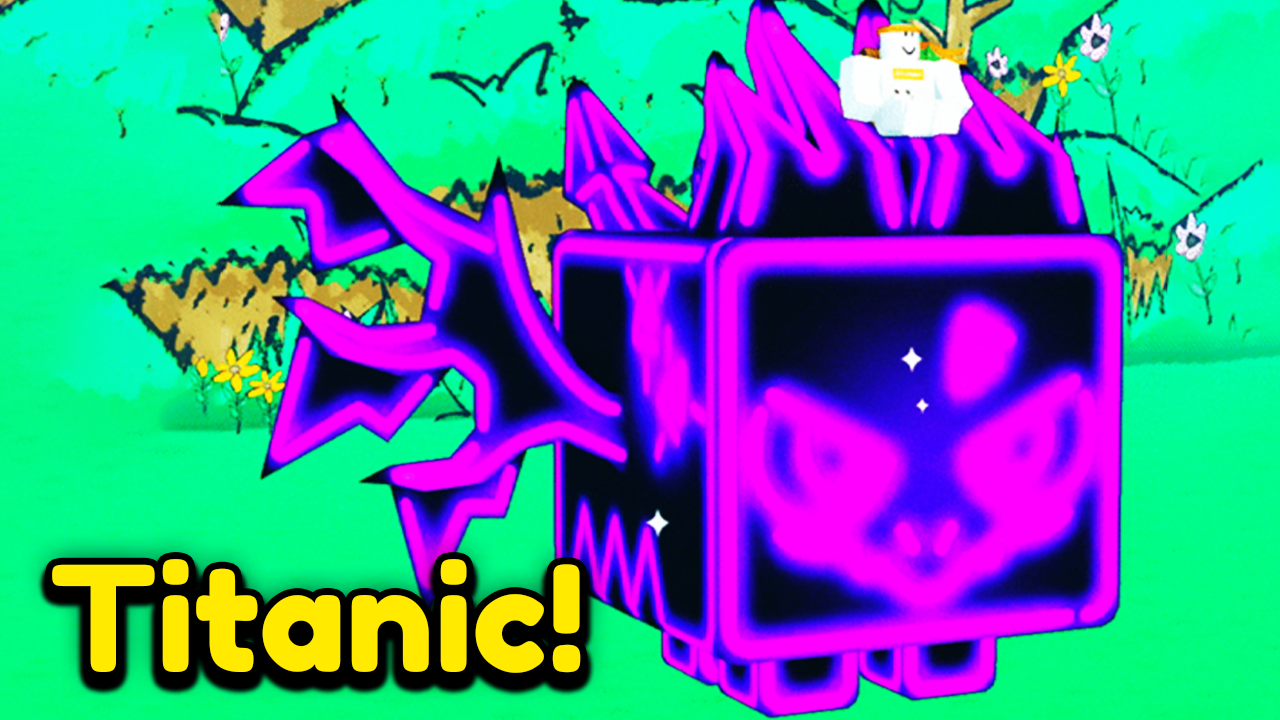
<style>
.page{position:relative;width:1280px;height:720px}
.page>*{position:absolute;margin:0}
.t1{font:145.9px "FredokaOne-Regular";color:#ffea00}
</style>
<div class="page">
<p class="t1" style="left:52px;top:559px;width:529px;height:114px">Titanic!</p>
</div>
